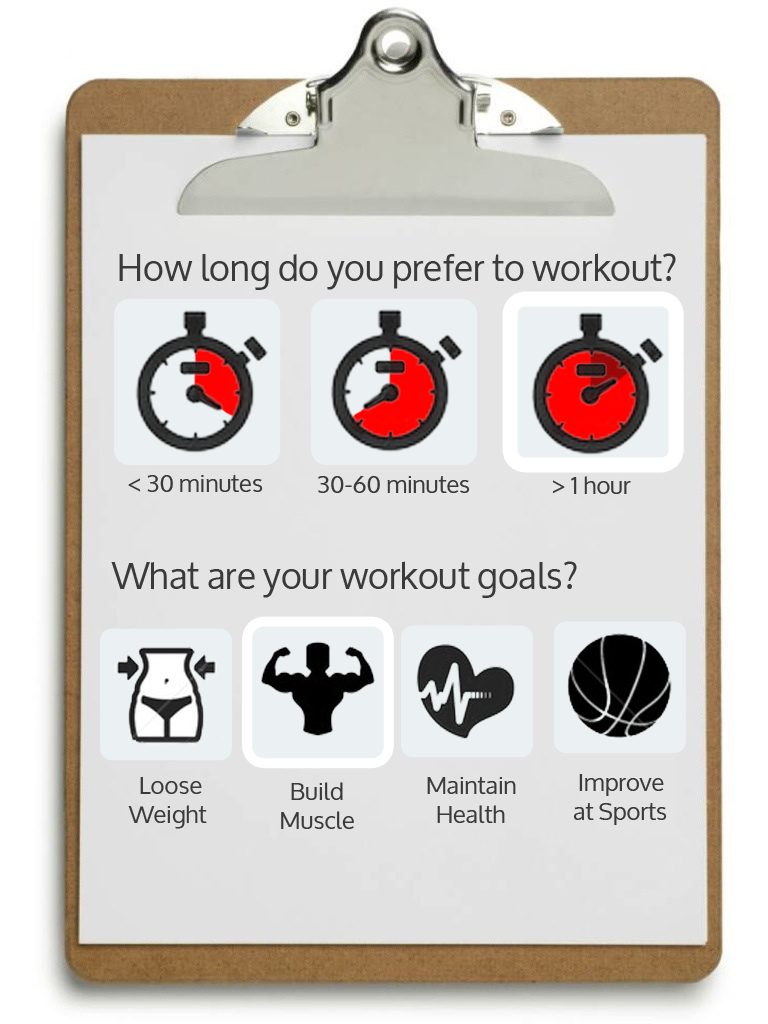
<style>
.page{position:relative;width:768px;height:1024px}
.page>*{position:absolute;margin:0}
.t1{font:36px "Oxygen";color:#3a3a3a}
.t2{font:24px "Oxygen";color:#3a3a3a}
</style>
<div class="page">
<p class="t1" style="left:119px;top:253px;width:557px;height:37px">How long do you prefer to workout?</p>
<p class="t2" style="left:128px;top:475px;width:135px;height:17px">&lt; 30 minutes</p>
<p class="t2" style="left:318px;top:476px;width:152px;height:17px">30-60 minutes</p>
<p class="t2" style="left:552px;top:476px;width:79px;height:18px">&gt; 1 hour</p>
<p class="t1" style="left:111px;top:561px;width:466px;height:37px">What are your workout goals?</p>
<p class="t2" style="left:573px;top:774px;width:94px;height:51px">Improve<br>at Sports</p>
<p class="t2" style="left:128px;top:777px;width:79px;height:52px">Loose<br>Weight</p>
<p class="t2" style="left:281px;top:782px;width:73px;height:47px">Build<br>Muscle</p>
<p class="t2" style="left:427px;top:777px;width:89px;height:46px">Maintain<br>  Health</p>
</div>
